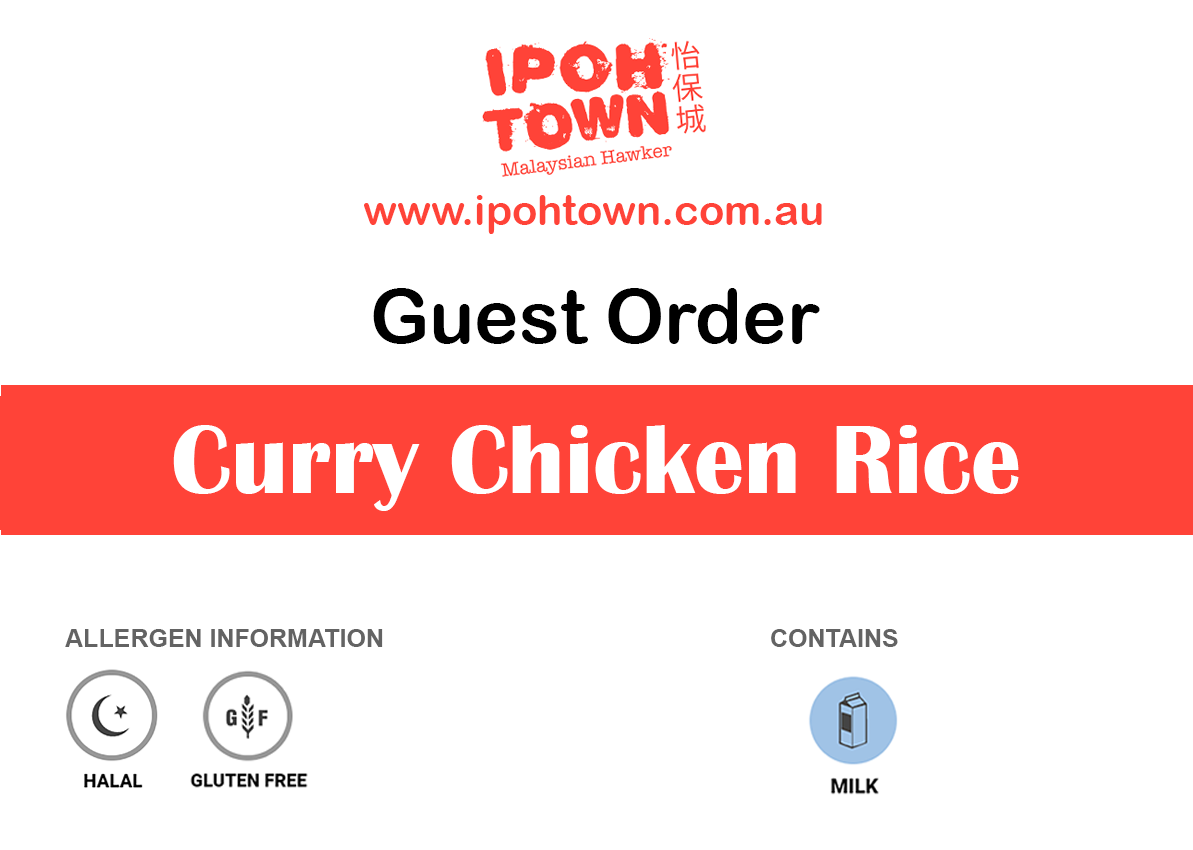
<style>
.page{position:relative;width:1193px;height:850px;background:#ffffff}
.page>*{position:absolute;margin:0}
.t1{font:41.7px "ArialRoundedMTBold";color:#ff4338}
.t2{font:75px "ArialRoundedMTBold";color:#000000}
.t3{font:100px "BritannicBold";color:#ffffff}
.t4{font:25px "Arial-BoldMT";color:#636363}
</style>
<div class="page">
<p class="t1" style="left:364px;top:195px;width:458px;height:39px">www.ipohtown.com.au</p>
<p class="t2" style="left:373px;top:288px;width:447px;height:56px">Guest Order</p>
<p class="t3" style="left:173px;top:425px;width:846px;height:86px">Curry Chicken Rice</p>
<p class="t4" style="left:65px;top:629px;width:318px;height:18px">ALLERGEN INFORMATION</p>
<p class="t4" style="left:771px;top:629px;width:127px;height:18px">CONTAINS</p>
</div>
